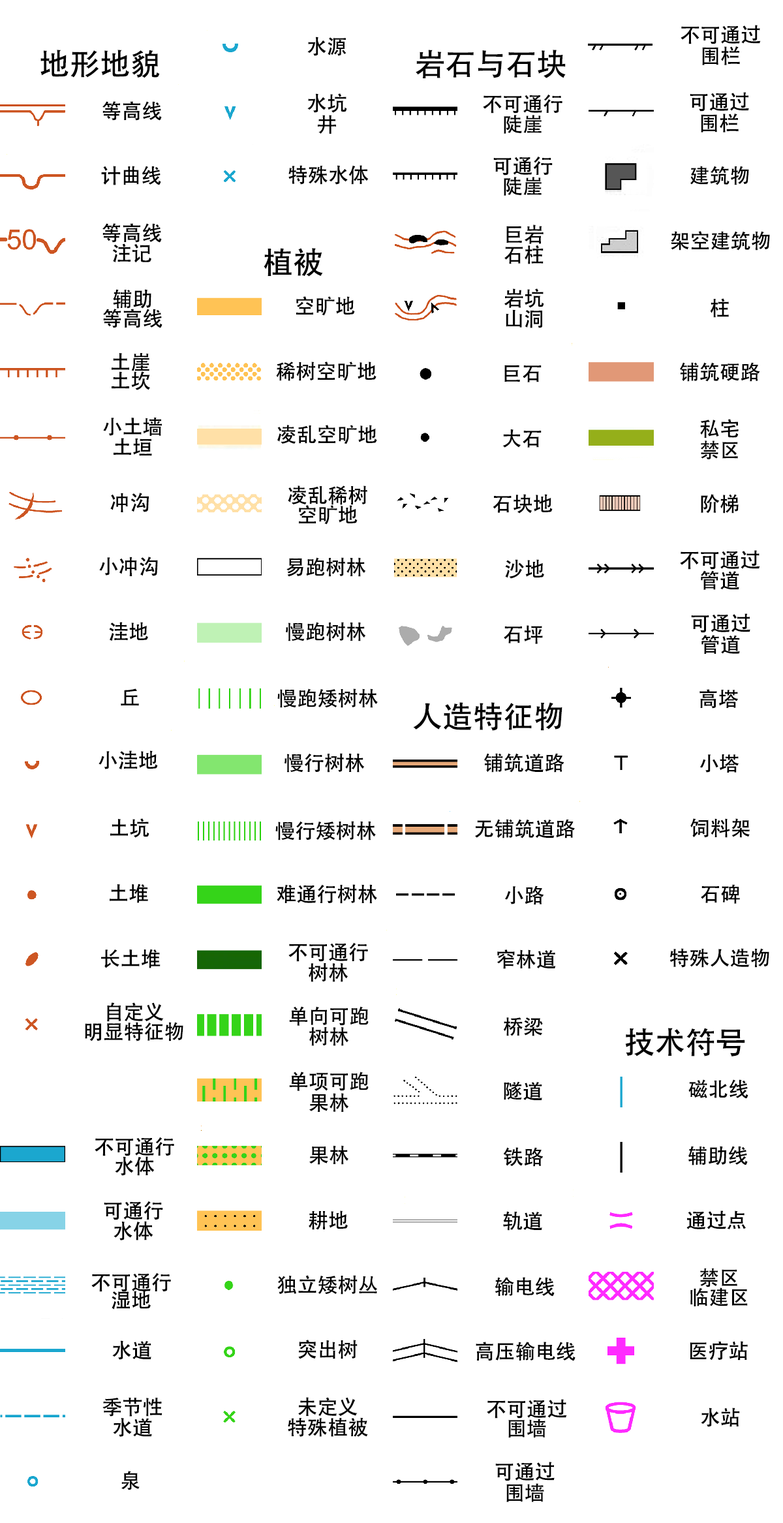
<style>
.page{position:relative;width:783px;height:1523px;background:#ffffff}
.page>*{position:absolute;margin:0}
.t1{font:34.8px/21.3px "AdobeHeitiStd-Regular";color:#000000}
.t2{font:34.8px "AdobeHeitiStd-Regular";color:#000000}
.t3{font:52.2px "AdobeHeitiStd-Regular";color:#000000}
.t4{font:34.8px/20.4px "AdobeHeitiStd-Regular";color:#000000}
.t5{font:34.8px/19.6px "AdobeHeitiStd-Regular";color:#000000}
.t6{font:34.8px/18.7px "AdobeHeitiStd-Regular";color:#000000}
.t7{font:34.8px/17.8px "AdobeHeitiStd-Regular";color:#000000}
</style>
<div class="page">
<p class="t1" style="left:681px;top:25px;width:80px;height:40px;text-align:center">不可通过<br>围栏</p>
<p class="t2" style="left:307px;top:37px;width:39px;height:19px">水源</p>
<p class="t3" style="left:40px;top:50px;width:120px;height:28px">地形地貌</p>
<p class="t3" style="left:416px;top:50px;width:150px;height:28px">岩石与石块</p>
<p class="t2" style="left:102px;top:101px;width:60px;height:20px">等高线</p>
<p class="t1" style="left:307px;top:93px;width:40px;height:41px;text-align:center">水坑<br>井</p>
<p class="t4" style="left:483px;top:94px;width:79px;height:40px;text-align:center">不可通行<br>陡崖</p>
<p class="t1" style="left:690px;top:92px;width:59px;height:40px;text-align:center">可通过<br>围栏</p>
<p class="t4" style="left:493px;top:156px;width:60px;height:40px;text-align:center">可通行<br>陡崖</p>
<p class="t2" style="left:101px;top:166px;width:60px;height:19px">计曲线</p>
<p class="t2" style="left:288px;top:165px;width:81px;height:20px">特殊水体</p>
<p class="t2" style="left:690px;top:166px;width:59px;height:19px">建筑物</p>
<p class="t4" style="left:102px;top:223px;width:60px;height:40px;text-align:center">等高线<br>注记</p>
<p class="t4" style="left:504px;top:224px;width:40px;height:40px;text-align:center">巨岩<br>石柱</p>
<p class="t2" style="left:671px;top:231px;width:99px;height:20px">架空建筑物</p>
<p class="t3" style="left:264px;top:248px;width:59px;height:29px">植被</p>
<p class="t5" style="left:103px;top:289px;width:59px;height:39px;text-align:center">辅助<br>等高线</p>
<p class="t4" style="left:504px;top:288px;width:40px;height:40px;text-align:center">岩坑<br>山洞</p>
<p class="t2" style="left:296px;top:296px;width:59px;height:20px">空旷地</p>
<p class="t2" style="left:710px;top:298px;width:19px;height:20px">柱</p>
<p class="t6" style="left:112px;top:353px;width:38px;height:37px;text-align:center">土崖<br>土坎</p>
<p class="t2" style="left:276px;top:361px;width:100px;height:20px">稀树空旷地</p>
<p class="t2" style="left:504px;top:365px;width:38px;height:17px">巨石</p>
<p class="t2" style="left:680px;top:362px;width:80px;height:20px">铺筑硬路</p>
<p class="t4" style="left:103px;top:417px;width:59px;height:39px;text-align:center">小土墙<br>土垣</p>
<p class="t2" style="left:277px;top:425px;width:100px;height:19px">凌乱空旷地</p>
<p class="t1" style="left:700px;top:419px;width:39px;height:40px;text-align:center">私宅<br>禁区</p>
<p class="t2" style="left:502px;top:429px;width:40px;height:19px">大石</p>
<p class="t5" style="left:288px;top:485px;width:79px;height:40px;text-align:center">凌乱稀树<br>空旷地</p>
<p class="t2" style="left:110px;top:493px;width:39px;height:19px">冲沟</p>
<p class="t2" style="left:493px;top:494px;width:60px;height:20px">石块地</p>
<p class="t2" style="left:701px;top:494px;width:38px;height:20px">阶梯</p>
<p class="t2" style="left:99px;top:557px;width:59px;height:19px">小冲沟</p>
<p class="t2" style="left:286px;top:557px;width:80px;height:20px">易跑树林</p>
<p class="t4" style="left:680px;top:550px;width:80px;height:40px;text-align:center">不可通过<br>管道</p>
<p class="t2" style="left:505px;top:559px;width:39px;height:20px">沙地</p>
<p class="t1" style="left:691px;top:613px;width:59px;height:41px;text-align:center">可通过<br>管道</p>
<p class="t2" style="left:109px;top:622px;width:39px;height:19px">洼地</p>
<p class="t2" style="left:286px;top:622px;width:80px;height:19px">慢跑树林</p>
<p class="t2" style="left:504px;top:625px;width:39px;height:19px">石坪</p>
<p class="t2" style="left:121px;top:688px;width:18px;height:18px">丘</p>
<p class="t2" style="left:277px;top:688px;width:101px;height:20px">慢跑矮树林</p>
<p class="t2" style="left:699px;top:689px;width:39px;height:20px">高塔</p>
<p class="t3" style="left:413px;top:702px;width:149px;height:29px">人造特征物</p>
<p class="t2" style="left:99px;top:750px;width:59px;height:19px">小洼地</p>
<p class="t2" style="left:284px;top:753px;width:81px;height:20px">慢行树林</p>
<p class="t2" style="left:484px;top:753px;width:80px;height:20px">铺筑道路</p>
<p class="t2" style="left:700px;top:754px;width:39px;height:19px">小塔</p>
<p class="t2" style="left:110px;top:818px;width:39px;height:20px">土坑</p>
<p class="t2" style="left:275px;top:821px;width:101px;height:19px">慢行矮树林</p>
<p class="t2" style="left:475px;top:819px;width:100px;height:19px">无铺筑道路</p>
<p class="t2" style="left:690px;top:818px;width:60px;height:20px">饲料架</p>
<p class="t2" style="left:110px;top:883px;width:38px;height:20px">土堆</p>
<p class="t2" style="left:277px;top:884px;width:100px;height:20px">难通行树林</p>
<p class="t2" style="left:505px;top:885px;width:39px;height:20px">小路</p>
<p class="t2" style="left:701px;top:884px;width:39px;height:20px">石碑</p>
<p class="t2" style="left:101px;top:949px;width:60px;height:19px">长土堆</p>
<p class="t4" style="left:288px;top:942px;width:80px;height:40px;text-align:center">不可通行<br>树林</p>
<p class="t2" style="left:497px;top:949px;width:59px;height:20px">窄林道</p>
<p class="t2" style="left:669px;top:948px;width:100px;height:20px">特殊人造物</p>
<p class="t5" style="left:85px;top:1002px;width:98px;height:39px;text-align:center">自定义<br>明显特征物</p>
<p class="t4" style="left:289px;top:1006px;width:80px;height:40px;text-align:center">单向可跑<br>树林</p>
<p class="t2" style="left:504px;top:1017px;width:39px;height:19px">桥梁</p>
<p class="t3" style="left:625px;top:1028px;width:120px;height:28px">技术符号</p>
<p class="t1" style="left:289px;top:1071px;width:80px;height:41px;text-align:center">单项可跑<br>果林</p>
<p class="t2" style="left:504px;top:1081px;width:38px;height:19px">隧道</p>
<p class="t2" style="left:688px;top:1079px;width:60px;height:20px">磁北线</p>
<p class="t5" style="left:95px;top:1137px;width:79px;height:39px;text-align:center">不可通行<br>水体</p>
<p class="t2" style="left:309px;top:1145px;width:40px;height:20px">果林</p>
<p class="t2" style="left:688px;top:1146px;width:60px;height:19px">辅助线</p>
<p class="t2" style="left:503px;top:1147px;width:40px;height:20px">铁路</p>
<p class="t4" style="left:104px;top:1201px;width:59px;height:39px;text-align:center">可通行<br>水体</p>
<p class="t2" style="left:309px;top:1210px;width:39px;height:20px">耕地</p>
<p class="t2" style="left:503px;top:1211px;width:39px;height:20px">轨道</p>
<p class="t2" style="left:686px;top:1210px;width:60px;height:19px">通过点</p>
<p class="t7" style="left:91px;top:1272px;width:80px;height:38px;text-align:center">不可通行<br>湿地</p>
<p class="t2" style="left:277px;top:1275px;width:100px;height:20px">独立矮树丛</p>
<p class="t2" style="left:495px;top:1277px;width:60px;height:20px">输电线</p>
<p class="t5" style="left:690px;top:1268px;width:58px;height:38px;text-align:center">禁区<br>临建区</p>
<p class="t2" style="left:112px;top:1340px;width:39px;height:20px">水道</p>
<p class="t2" style="left:298px;top:1340px;width:60px;height:19px">突出树</p>
<p class="t2" style="left:476px;top:1342px;width:99px;height:19px">高压输电线</p>
<p class="t2" style="left:690px;top:1341px;width:58px;height:19px">医疗站</p>
<p class="t4" style="left:102px;top:1397px;width:60px;height:40px;text-align:center">季节性<br>水道</p>
<p class="t4" style="left:288px;top:1397px;width:80px;height:40px;text-align:center">未定义<br>特殊植被</p>
<p class="t5" style="left:487px;top:1399px;width:80px;height:38px;text-align:center">不可通过<br>围墙</p>
<p class="t2" style="left:701px;top:1407px;width:39px;height:20px">水站</p>
<p class="t1" style="left:495px;top:1462px;width:60px;height:40px;text-align:center">可通过<br>围墙</p>
<p class="t2" style="left:121px;top:1471px;width:19px;height:19px">泉</p>
</div>
